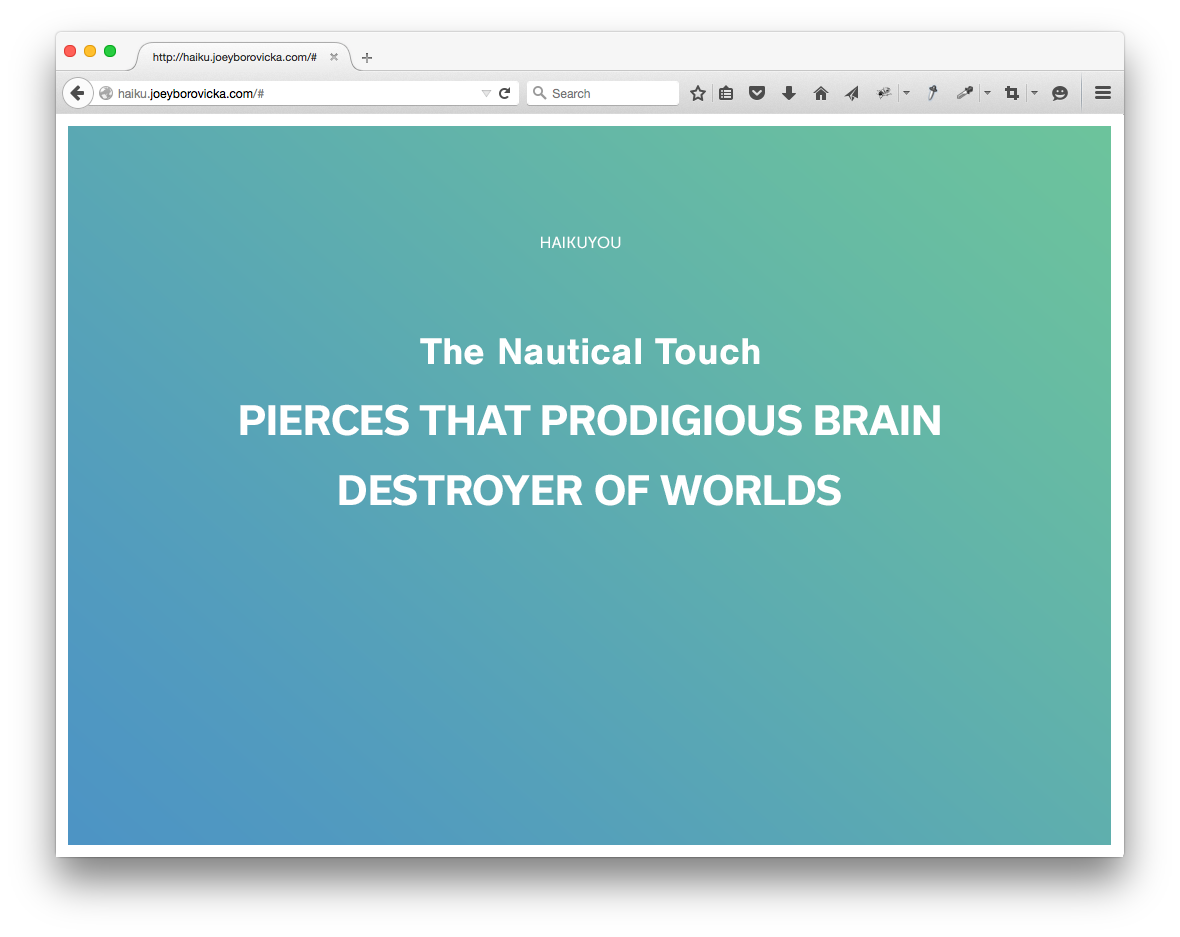
<style>
.page{position:relative;width:1180px;height:937px}
.page>*{position:absolute;margin:0}
.t1{font:16px "MuseoSans-500";color:#ffffff}
.t2{font:38.7px "NimbusSan-Bol";color:#ffffff}
.t3{font:38.7px "Usual-Bold";color:#ffffff}
</style>
<div class="page">
<p class="t1" style="left:541px;top:236px;width:80px;height:13px">HAIKUYOU</p>
<p class="t2" style="left:420px;top:338px;width:340px;height:27px">The Nautical Touch</p>
<p class="t3" style="left:240px;top:404px;width:700px;height:32px">PIERCES THAT PRODIGIOUS BRAIN</p>
<p class="t3" style="left:339px;top:474px;width:502px;height:32px">DESTROYER OF WORLDS</p>
</div>
